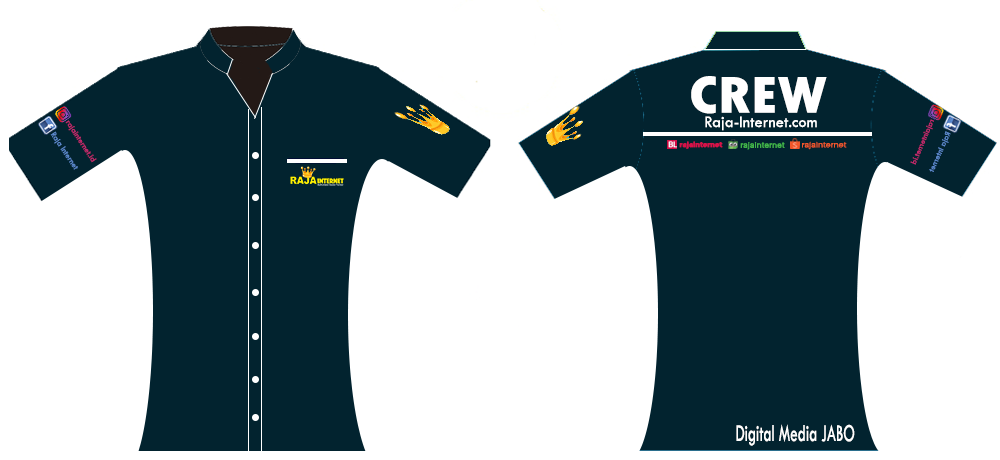
<style>
.page{position:relative;width:1000px;height:460px;background:#ffffff}
.page>*{position:absolute;margin:0}
.t1{font:54.3px "TwCenMT-CondensedExtraBold";color:#ffffff;scale:1.2 1}
.t2{font:8.5px "TwCenMT-Regular";color:#c6296d}
.t3{font:16.7px "TwCenMT-Regular";color:#ffffff}
.t4{font:8.4px "TwCenMT-Regular";color:#c6296d}
.t5{font:8.7px "TwCenMT-Regular";color:#5c89cd}
.t6{font:7.2px "Aileron-Black";color:#d71149;font-weight:bold;scale:0.95 1}
.t7{font:7.9px "Aileron-Regular";color:#42b549;font-weight:bold;scale:1.04 1}
.t8{font:7.7px "Aileron-Light";color:#f1582c;font-weight:bold;scale:1.13 1}
.t9{font:25.1px "TwCenMT-Regular";color:#ffffff;scale:0.59 1}
</style>
<div class="page">
<p class="t1" style="left:691px;top:76px;width:136px;height:38px">CREW</p>
<p class="t2" style="left:65px;top:120px;width:32px;height:43px;rotate:57deg">rajainternet.id</p>
<p class="t3" style="left:705px;top:116px;width:112px;height:15px">Raja-Internet.com</p>
<p class="t4" style="left:910px;top:119px;width:24px;height:46px;rotate:113deg">rajainternet.id</p>
<p class="t5" style="left:50px;top:131px;width:28px;height:39px;rotate:56deg">Raja Internet</p>
<p class="t5" style="left:929px;top:131px;width:22px;height:41px;rotate:114deg">Raja Internet</p>
<p class="t6" style="left:679px;top:141px;width:44px;height:8px">rajainternet</p>
<p class="t7" style="left:740px;top:142px;width:45px;height:8px">rajainternet</p>
<p class="t8" style="left:802px;top:141px;width:45px;height:9px">rajainternet</p>
<p class="t9" style="left:736px;top:424px;width:119px;height:22px">Digital Media JABO</p>
</div>
